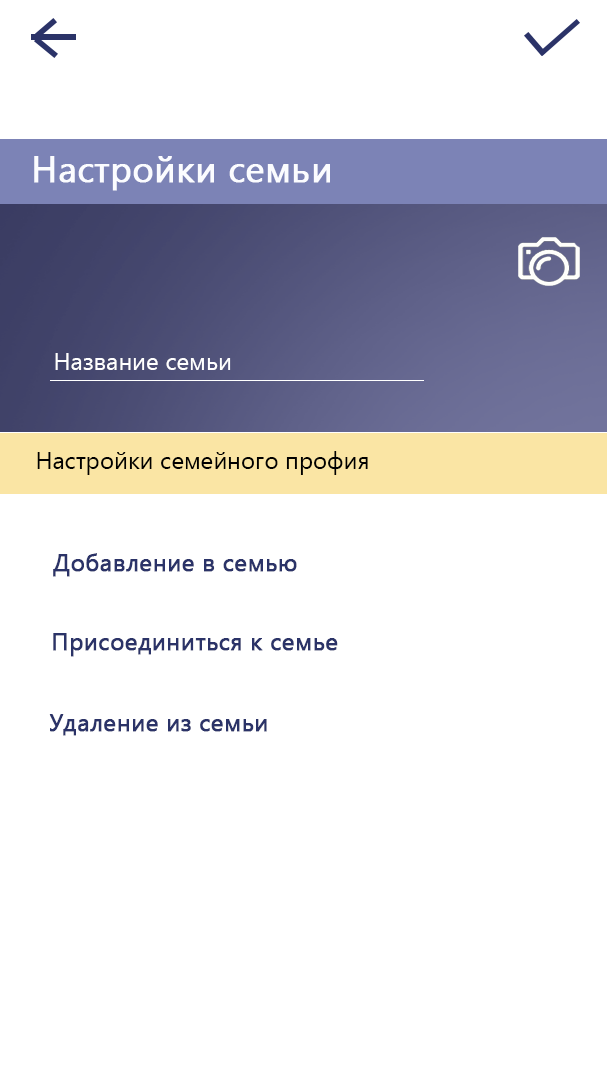
<style>
.page{position:relative;width:607px;height:1080px;background:#ffffff}
.page>*{position:absolute;margin:0}
.t1{font:36px "YuGothicUI-Regular";color:#fbfcff;font-weight:bold}
.t2{font:24px "YuGothicUI-Regular";color:#ffffff}
.t3{font:24px "YuGothicUI-Regular";color:#000000}
.t4{font:24px "YuGothicUI-Regular";color:#2b3368;font-weight:bold}
</style>
<div class="page">
<p class="t1" style="left:34px;top:156px;width:296px;height:35px">Настройки семьи</p>
<p class="t2" style="left:55px;top:353px;width:176px;height:17px">Название семьи</p>
<p class="t3" style="left:37px;top:451px;width:331px;height:24px">Настройки семейного профия</p>
<p class="t4" style="left:53px;top:553px;width:244px;height:24px">Добавление в семью</p>
<p class="t4" style="left:53px;top:633px;width:285px;height:24px">Присоединиться к семье</p>
<p class="t4" style="left:49px;top:714px;width:218px;height:22px">Удаление из семьи</p>
</div>
